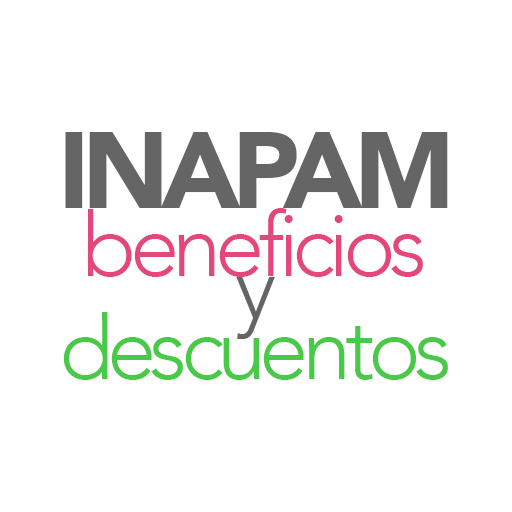
<style>
.page{position:relative;width:512px;height:512px;background:#ffffff}
.page>*{position:absolute;margin:0}
.t1{font:106.7px "Avenir-Black";letter-spacing:-0.075em;color:#656565}
.t2{font:88.9px "Avenir-Light";letter-spacing:-0.075em;color:#e4477a}
.t3{font:88.9px "Avenir-Light";letter-spacing:-0.075em;color:#656565}
.t4{font:88.9px "Avenir-Light";letter-spacing:-0.075em;color:#48ca48}
</style>
<div class="page">
<p class="t1" style="left:65px;top:132px;width:383px;height:76px">INAPAM</p>
<p class="t2" style="left:88px;top:208px;width:335px;height:69px">beneficios</p>
<p class="t3" style="left:236px;top:277px;width:39px;height:62px">y</p>
<p class="t4" style="left:63px;top:312px;width:385px;height:68px">descuentos</p>
</div>
